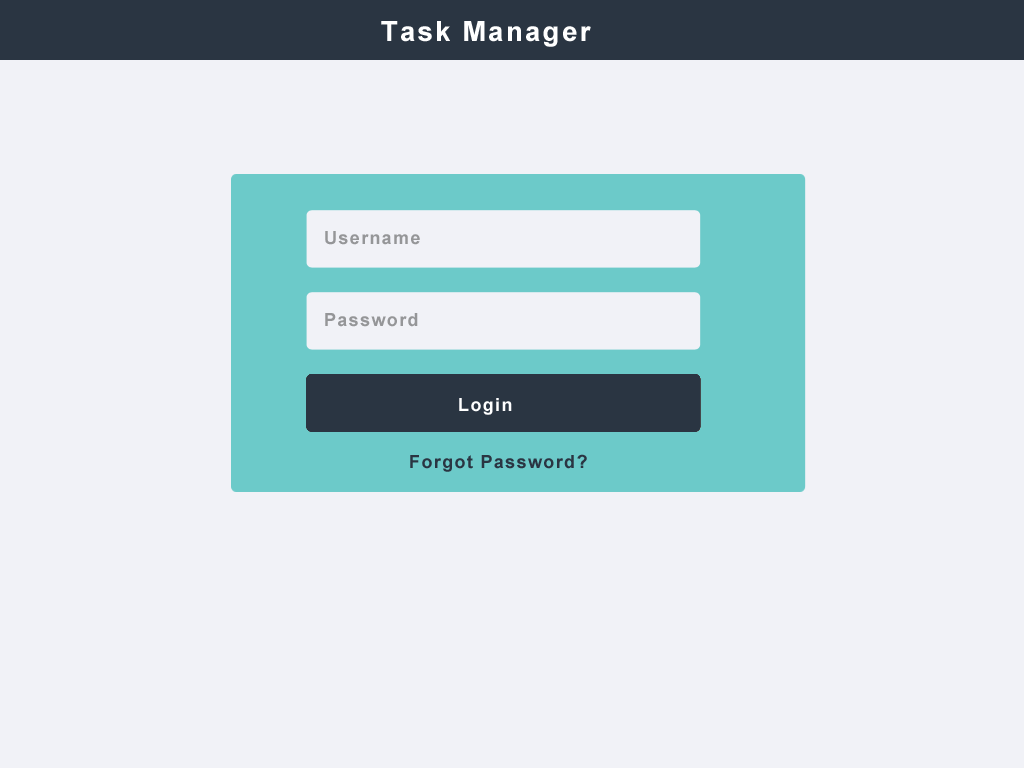
<style>
.page{position:relative;width:1024px;height:768px;background:#f1f2f7}
.page>*{position:absolute;margin:0}
.t1{font:28px "Arial-BoldMT";letter-spacing:0.075em;color:#ffffff}
.t2{font:18px "Arial-BoldMT";letter-spacing:0.075em;color:#959698}
.t3{font:18px "Arial-BoldMT";letter-spacing:0.075em;color:#ffffff}
.t4{font:18px "Arial-BoldMT";letter-spacing:0.075em;color:#2a3542}
</style>
<div class="page">
<p class="t1" style="left:381px;top:21px;width:210px;height:26px">Task Manager</p>
<p class="t2" style="left:325px;top:231px;width:95px;height:14px">Username</p>
<p class="t2" style="left:325px;top:313px;width:93px;height:14px">Password</p>
<p class="t3" style="left:459px;top:398px;width:53px;height:17px">Login</p>
<p class="t4" style="left:410px;top:454px;width:177px;height:18px">Forgot Password?</p>
</div>
